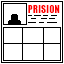
<style>
.page{position:relative;width:64px;height:64px;background:#ffffff}
.page>*{position:absolute;margin:0}
.t1{font:10px "Impact";color:#ff0000}
</style>
<div class="page">
<p class="t1" style="left:28px;top:5px;width:32px;height:8px">PRISION</p>
</div>
